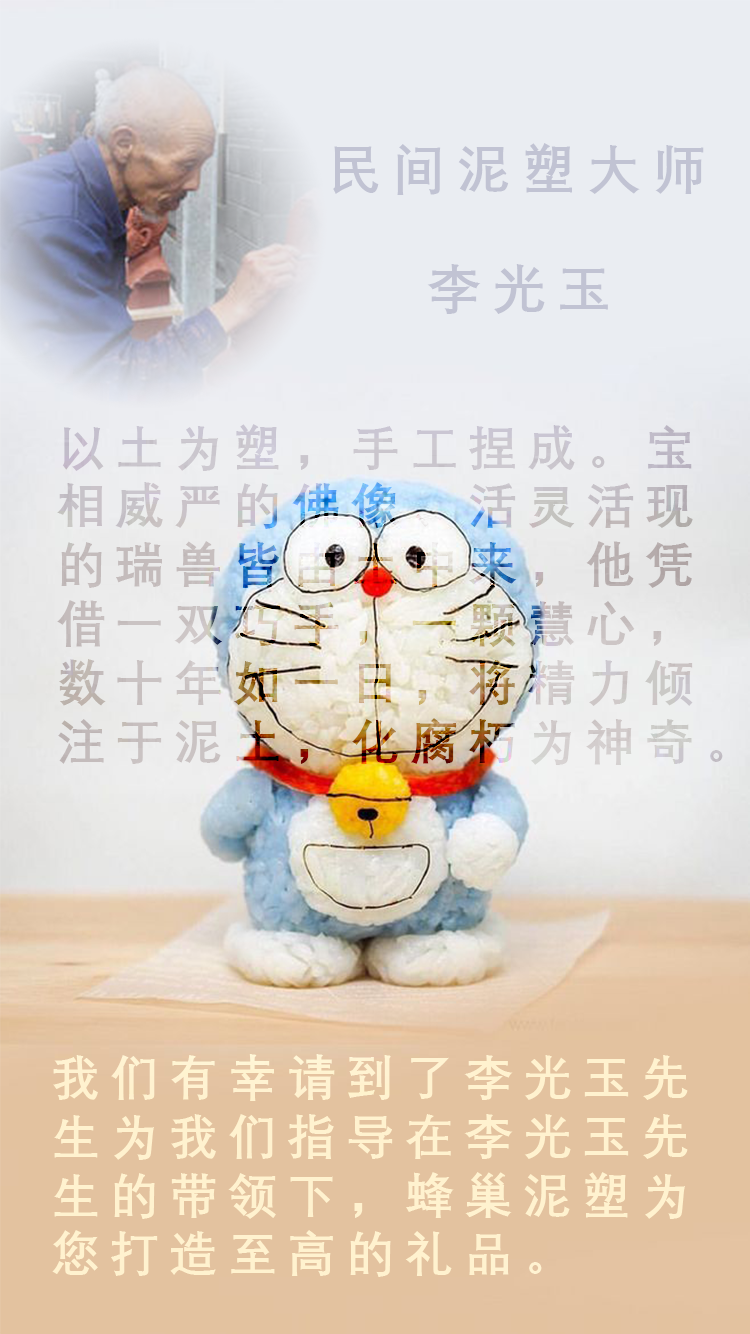
<style>
.page{position:relative;width:750px;height:1334px}
.page>*{position:absolute;margin:0}
.t1{font:54.3px "DengXian-Bold";letter-spacing:0.2em;color:#c1c3d3}
.t2{font:49px "DengXian-Bold";letter-spacing:0.2em}
.t3{font:49.1px "DengXian-Bold";letter-spacing:0.2em;color:#fff2cf}
</style>
<div class="page">
<p class="t1" style="left:333px;top:143px;width:371px;height:52px">民间泥塑大师</p>
<p class="t1" style="left:427px;top:264px;width:181px;height:50px">李光玉</p>
<p class="t2" style="left:57px;top:424px;width:666px;height:341px">以土为塑，手工捏成。宝<br>相威严的佛像、活灵活现<br>的瑞兽皆由土中来，他凭<br>借一双巧手，一颗慧心，<br>数十年如一日，将精力倾<br>注于泥土，化腐朽为神奇。</p>
<p class="t3" style="left:52px;top:1054px;width:636px;height:223px">我们有幸请到了李光玉先<br>生为我们指导在李光玉先<br>生的带领下，蜂巢泥塑为<br>您打造至高的礼品。</p>
</div>
